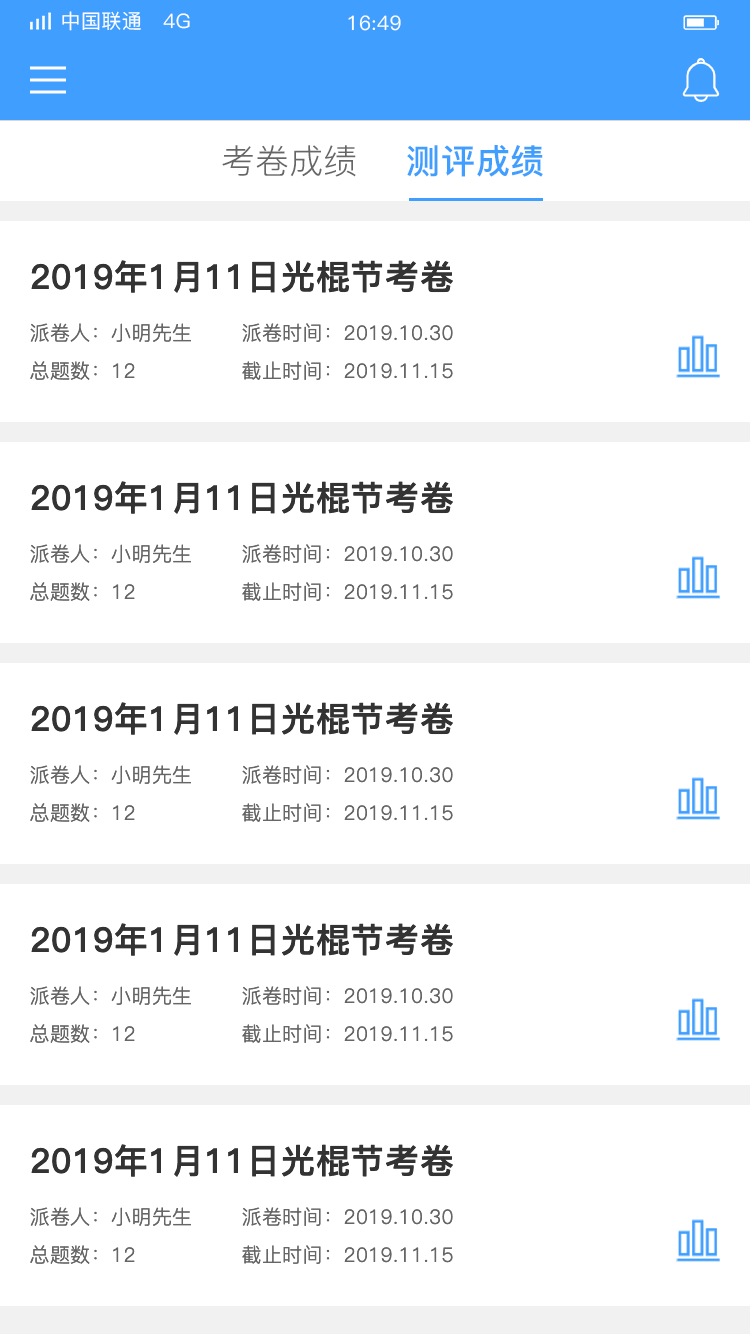
<style>
.page{position:relative;width:750px;height:1334px;background:#ffffff}
.page>*{position:absolute;margin:0}
.t1{font:20px "PingFang-SC-Medium";letter-spacing:0.02em;color:#ffffff}
.t2{font:34px "PingFang-SC-Regular";color:#666666}
.t3{font:34px "PingFang-SC-Bold";letter-spacing:0.02em;color:#409eff}
.t4{font:34px "PingFang-SC-Bold";letter-spacing:0.02em;color:#333333}
.t5{font:20px "PingFang-SC-Regular";letter-spacing:0.02em;color:#666666}
</style>
<div class="page">
<p class="t1" style="left:62px;top:11px;width:128px;height:20px">中国联通   4G</p>
<p class="t1" style="left:348px;top:15px;width:53px;height:16px">16:49</p>
<p class="t2" style="left:222px;top:145px;width:134px;height:32px">考卷成绩</p>
<p class="t3" style="left:407px;top:145px;width:136px;height:32px">测评成绩</p>
<p class="t4" style="left:31px;top:260px;width:422px;height:33px">2019年1月11日光棍节考卷</p>
<p class="t5" style="left:30px;top:323px;width:161px;height:19px">派卷人：小明先生</p>
<p class="t5" style="left:242px;top:323px;width:211px;height:19px">派卷时间：2019.10.30</p>
<p class="t5" style="left:30px;top:361px;width:105px;height:19px">总题数：12</p>
<p class="t5" style="left:242px;top:361px;width:211px;height:19px">截止时间：2019.11.15</p>
<p class="t4" style="left:31px;top:481px;width:422px;height:33px">2019年1月11日光棍节考卷</p>
<p class="t5" style="left:30px;top:544px;width:161px;height:19px">派卷人：小明先生</p>
<p class="t5" style="left:242px;top:544px;width:211px;height:19px">派卷时间：2019.10.30</p>
<p class="t5" style="left:30px;top:582px;width:105px;height:19px">总题数：12</p>
<p class="t5" style="left:242px;top:582px;width:211px;height:19px">截止时间：2019.11.15</p>
<p class="t4" style="left:31px;top:702px;width:422px;height:33px">2019年1月11日光棍节考卷</p>
<p class="t5" style="left:30px;top:765px;width:161px;height:19px">派卷人：小明先生</p>
<p class="t5" style="left:242px;top:765px;width:211px;height:19px">派卷时间：2019.10.30</p>
<p class="t5" style="left:30px;top:803px;width:105px;height:19px">总题数：12</p>
<p class="t5" style="left:242px;top:803px;width:211px;height:19px">截止时间：2019.11.15</p>
<p class="t4" style="left:31px;top:923px;width:422px;height:33px">2019年1月11日光棍节考卷</p>
<p class="t5" style="left:30px;top:986px;width:161px;height:19px">派卷人：小明先生</p>
<p class="t5" style="left:242px;top:986px;width:211px;height:19px">派卷时间：2019.10.30</p>
<p class="t5" style="left:30px;top:1024px;width:105px;height:19px">总题数：12</p>
<p class="t5" style="left:242px;top:1024px;width:211px;height:19px">截止时间：2019.11.15</p>
<p class="t4" style="left:31px;top:1144px;width:422px;height:33px">2019年1月11日光棍节考卷</p>
<p class="t5" style="left:30px;top:1207px;width:161px;height:19px">派卷人：小明先生</p>
<p class="t5" style="left:242px;top:1207px;width:211px;height:19px">派卷时间：2019.10.30</p>
<p class="t5" style="left:30px;top:1245px;width:105px;height:19px">总题数：12</p>
<p class="t5" style="left:242px;top:1245px;width:211px;height:19px">截止时间：2019.11.15</p>
</div>
